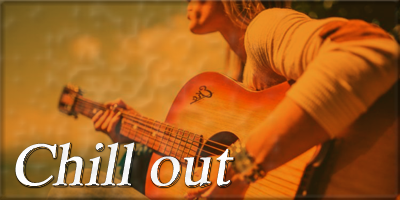
<style>
.page{position:relative;width:400px;height:200px}
.page>*{position:absolute;margin:0}
.t1{font:58.3px "Dutch801BT-Roman";letter-spacing:-0.025em;color:#ffffff;font-weight:bold;font-style:italic}
</style>
<div class="page">
<p class="t1" style="left:15px;top:142px;width:219px;height:45px">Chill out</p>
</div>
